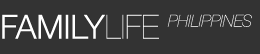
<style>
.page{position:relative;width:260px;height:54px;background:#333333}
.page>*{position:absolute;margin:0}
.t1{font:16.5px "HelveticaNeue-UltraLightItalic";color:#ffffff}
.t2{font:33px "HelveticaNeue-Light";color:#ffffff}
.t3{font:33px "HelveticaNeue-UltraLight";color:#ffffff}
</style>
<div class="page">
<p class="t1" style="left:2px;top:14px;width:250px;height:25px"><span class="t2">FAMILY</span><span class="t3">LIFE </span>PHILIPPINES</p>
</div>
